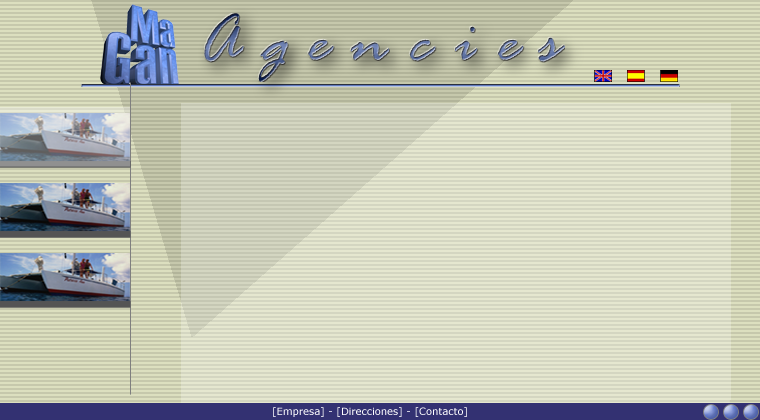
<style>
.page{position:relative;width:760px;height:420px;background:#d4d6c1}
.page>*{position:absolute;margin:0}
.t1{font:72px "RageItalicLetPlain";letter-spacing:0.3em}
.t2{font:10px "Verdana";color:#ffffff}
</style>
<div class="page">
<p class="t1" style="left:204px;top:13px;width:361px;height:69px">Agencies</p>
<p class="t2" style="left:273px;top:407px;width:194px;height:10px">[Empresa] - [Direcciones] - [Contacto]</p>
</div>
